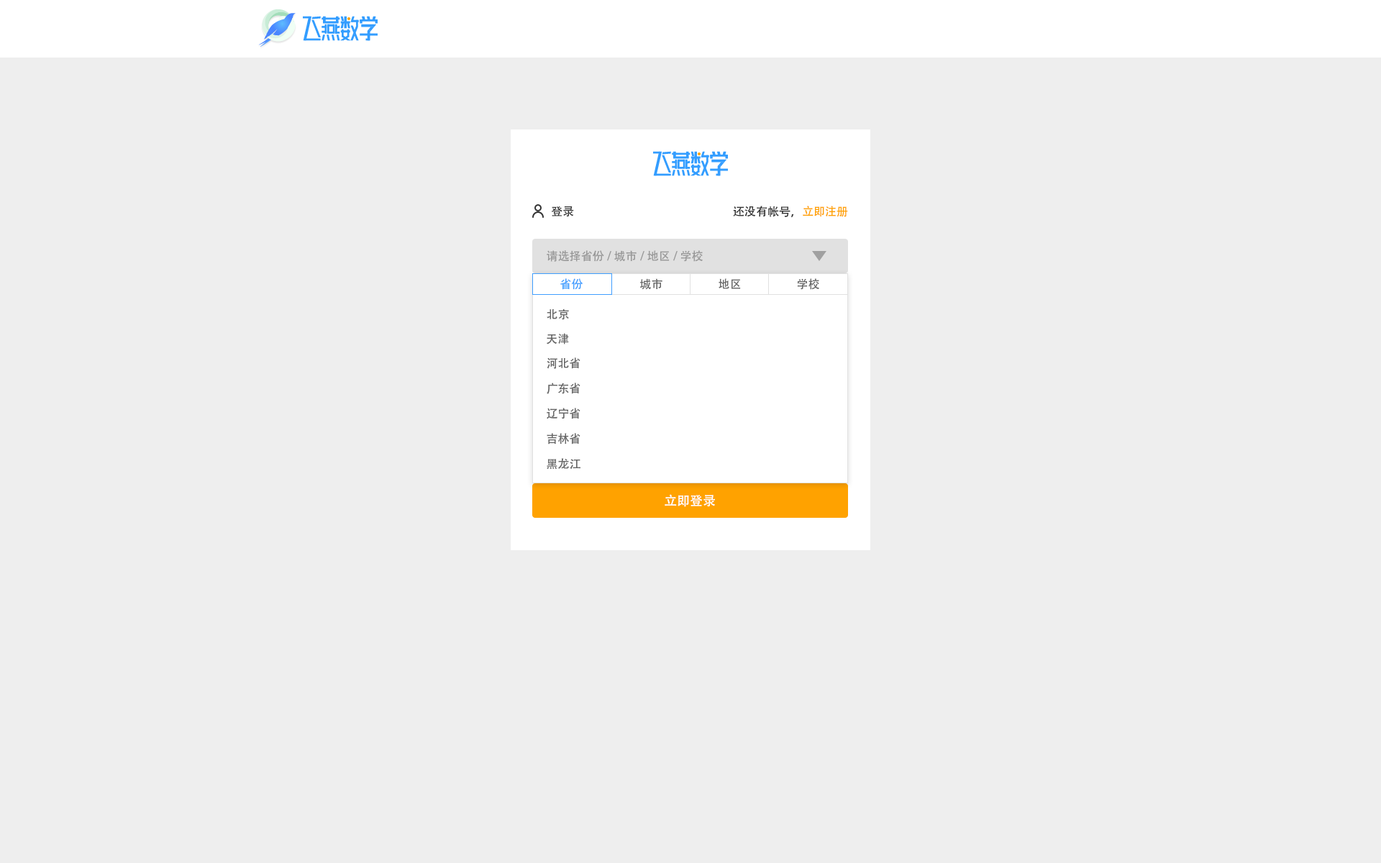
<style>
.page{position:relative;width:1381px;height:863px;background:#eeeeee}
.page>*{position:absolute;margin:0}
.t1{font:11.5px "AdobeHeitiStd-Regular";color:#333333}
.t2{font:11.5px "AdobeHeitiStd-Regular";color:#ffa200}
.t3{font:11.5px "AdobeHeitiStd-Regular";color:#999999}
.t4{font:11.5px "AdobeHeitiStd-Regular";color:#409eff}
.t5{font:11.5px "AdobeHeitiStd-Regular";color:#666666}
.t6{font:12.9px "AdobeHeitiStd-Regular";color:#ffffff}
</style>
<div class="page">
<p class="t1" style="left:551px;top:206px;width:23px;height:11px">登录</p>
<p class="t1" style="left:733px;top:206px;width:115px;height:11px">还没有帐号，<span class="t2">立即注册</span></p>
<p class="t3" style="left:547px;top:250px;width:156px;height:12px">请选择省份/城市/地区/学校</p>
<p class="t4" style="left:560px;top:278px;width:23px;height:12px">省份</p>
<p class="t5" style="left:640px;top:278px;width:23px;height:12px">城市</p>
<p class="t5" style="left:719px;top:278px;width:22px;height:11px">地区</p>
<p class="t5" style="left:797px;top:278px;width:22px;height:12px">学校</p>
<p class="t5" style="left:547px;top:309px;width:22px;height:11px">北京</p>
<p class="t5" style="left:547px;top:333px;width:22px;height:12px">天津</p>
<p class="t5" style="left:547px;top:358px;width:34px;height:11px">河北省</p>
<p class="t5" style="left:547px;top:383px;width:34px;height:11px">广东省</p>
<p class="t5" style="left:547px;top:408px;width:34px;height:11px">辽宁省</p>
<p class="t5" style="left:547px;top:433px;width:34px;height:12px">吉林省</p>
<p class="t5" style="left:547px;top:458px;width:34px;height:12px">黑龙江</p>
<p class="t6" style="left:665px;top:494px;width:50px;height:13px">立即登录</p>
</div>
